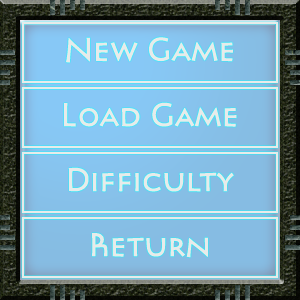
<style>
.page{position:relative;width:300px;height:300px}
.page>*{position:absolute;margin:0}
.t1{font:30px "Pericles";color:#e8ebeb}
</style>
<div class="page">
<p class="t1" style="left:66px;top:37px;width:167px;height:26px">New Game</p>
<p class="t1" style="left:64px;top:102px;width:173px;height:25px">Load Game</p>
<p class="t1" style="left:68px;top:167px;width:166px;height:25px">Difficulty</p>
<p class="t1" style="left:92px;top:233px;width:116px;height:25px">Return</p>
</div>
